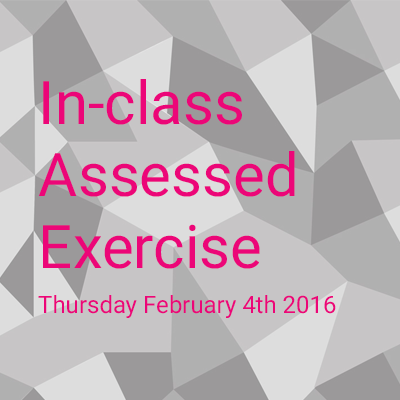
<style>
.page{position:relative;width:400px;height:400px;background:#c7c5c6}
.page>*{position:absolute;margin:0}
.t1{font:60px "Roboto-Regular";color:#ec0678}
.t2{font:24px "Roboto-Regular";color:#ec0678}
</style>
<div class="page">
<p class="t1" style="left:38px;top:79px;width:257px;height:190px">In-class <br>Assessed <br>Exercise</p>
<p class="t2" style="left:38px;top:295px;width:298px;height:23px">Thursday February 4th 2016</p>
</div>
